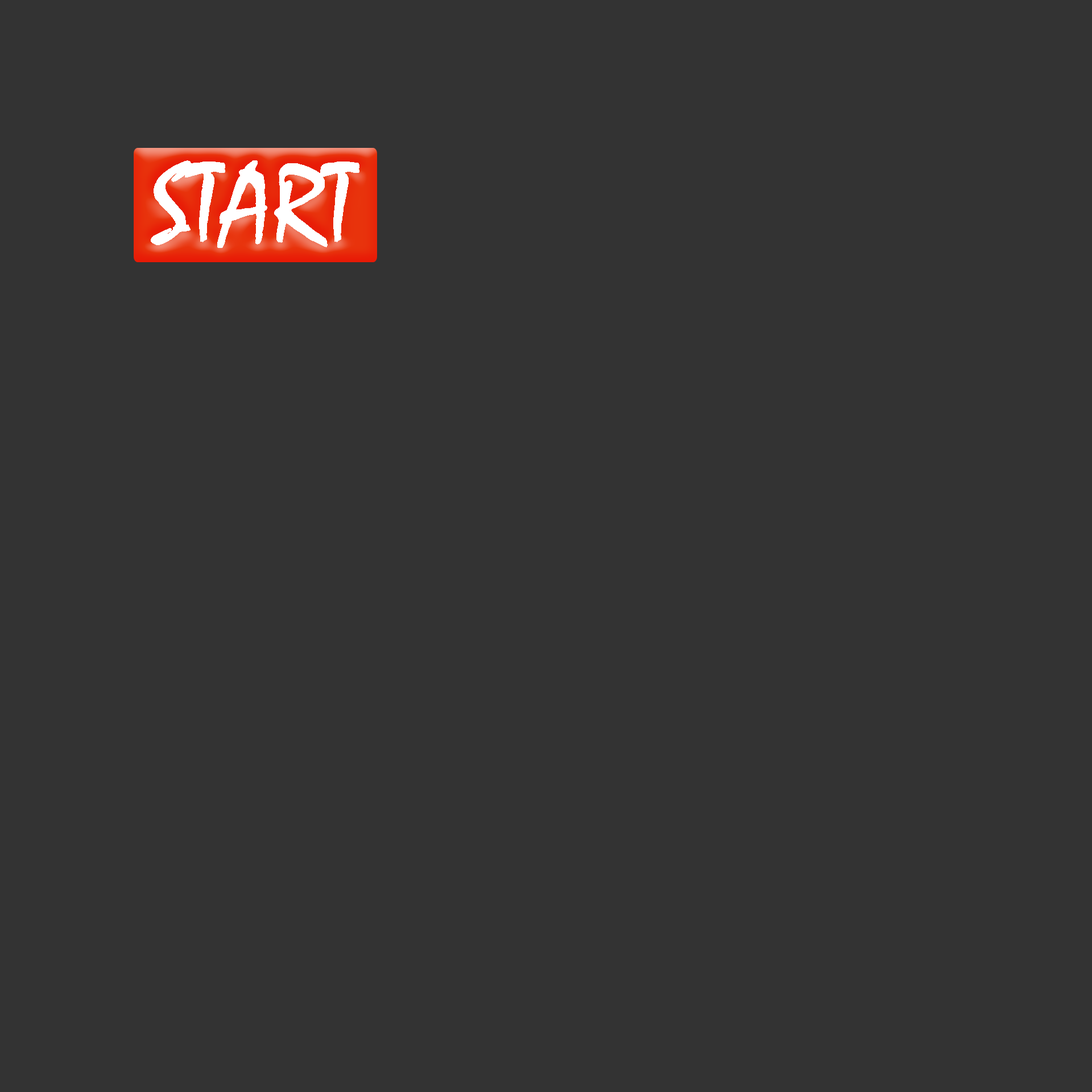
<style>
.page{position:relative;width:1092px;height:1092px;background:#333333}
.page>*{position:absolute;margin:0}
.t1{font:113.7px "Mistral";color:#ffffff}
</style>
<div class="page">
<p class="t1" style="left:151px;top:160px;width:208px;height:88px">START</p>
</div>
